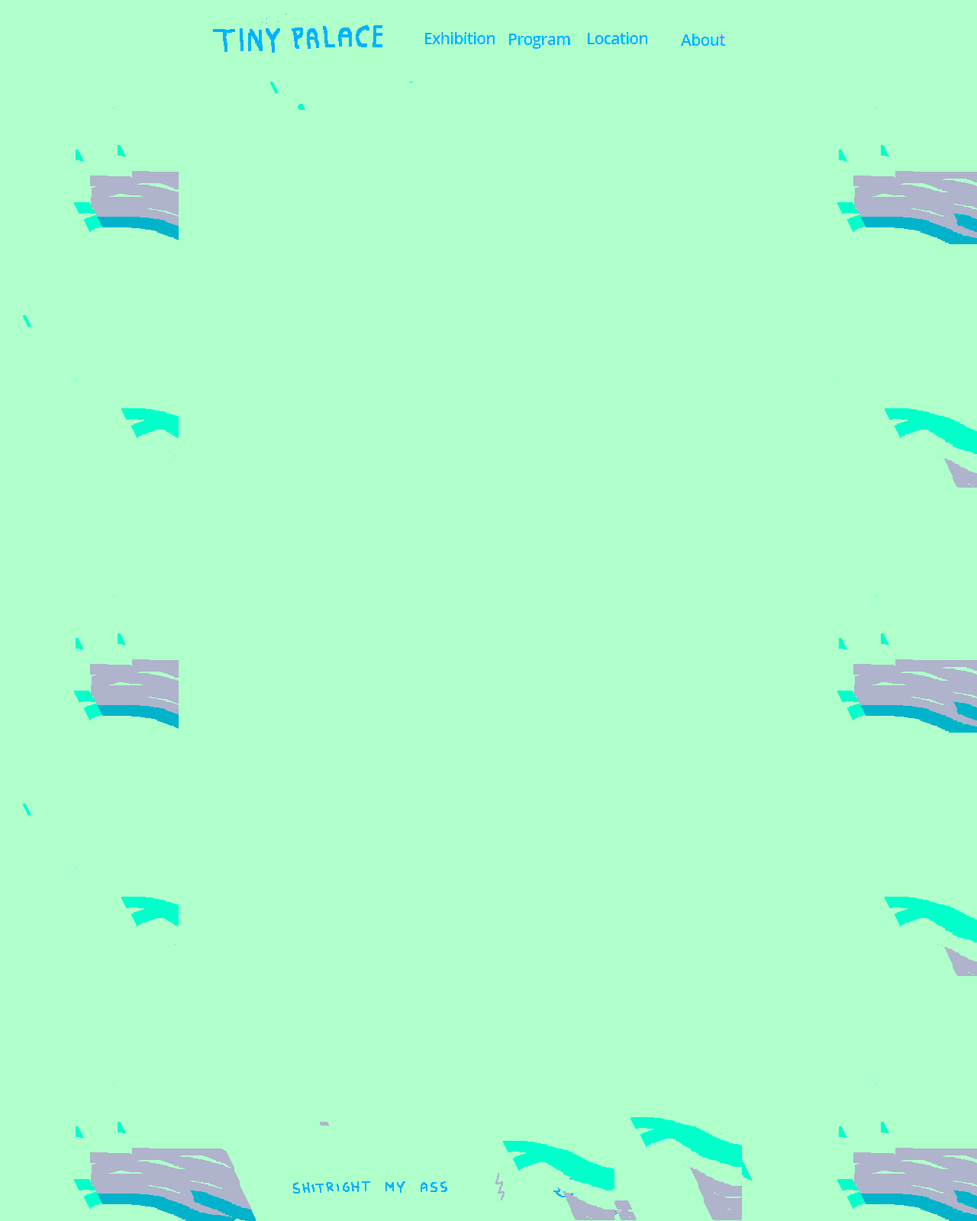
<style>
.page{position:relative;width:977px;height:1221px;background:#afffcb}
.page>*{position:absolute;margin:0}
.t1{font:16.2px "OpenSans-Semibold";letter-spacing:-0.04em;color:#00b3ff}
</style>
<div class="page">
<p class="t1" style="left:425px;top:32px;width:70px;height:12px">Exhibition</p>
<p class="t1" style="left:509px;top:34px;width:61px;height:15px">Program</p>
<p class="t1" style="left:588px;top:32px;width:60px;height:12px">Location</p>
<p class="t1" style="left:681px;top:34px;width:44px;height:12px">About</p>
</div>
